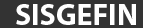
<style>
.page{position:relative;width:143px;height:28px;background:#333333}
.page>*{position:absolute;margin:0}
.t1{font:30px "MyriadPro-Bold";color:#ffffff}
</style>
<div class="page">
<p class="t1" style="left:16px;top:4px;width:120px;height:21px">SISGEFIN</p>
</div>
